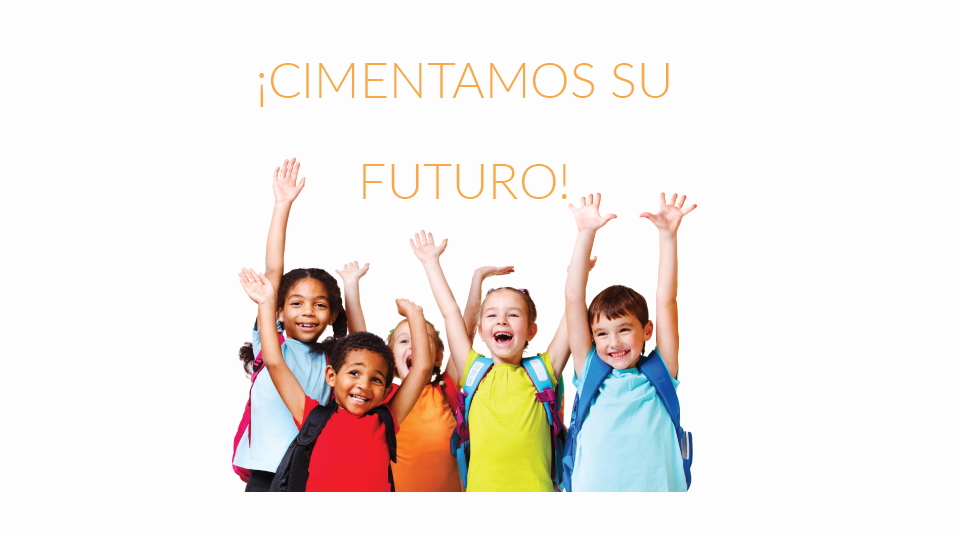
<style>
.page{position:relative;width:960px;height:536px;background:#fcfdfc}
.page>*{position:absolute;margin:0}
.t1{font:50px/50.5px "Lato-Light";color:#faa845}
</style>
<div class="page">
<p class="t1" style="left:259px;top:63px;width:410px;height:136px;text-align:center">¡CIMENTAMOS SU <br><br>FUTURO!</p>
</div>
